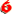
<style>
.page{position:relative;width:12px;height:14px;background:#ff0000}
.page>*{position:absolute;margin:0}
.t1{font:16.7px "TOXIA";color:#ff0000;scale:1.29 1}
</style>
<div class="page">
<p class="t1" style="left:1px;top:0px;width:11px;height:13px">6</p>
</div>
